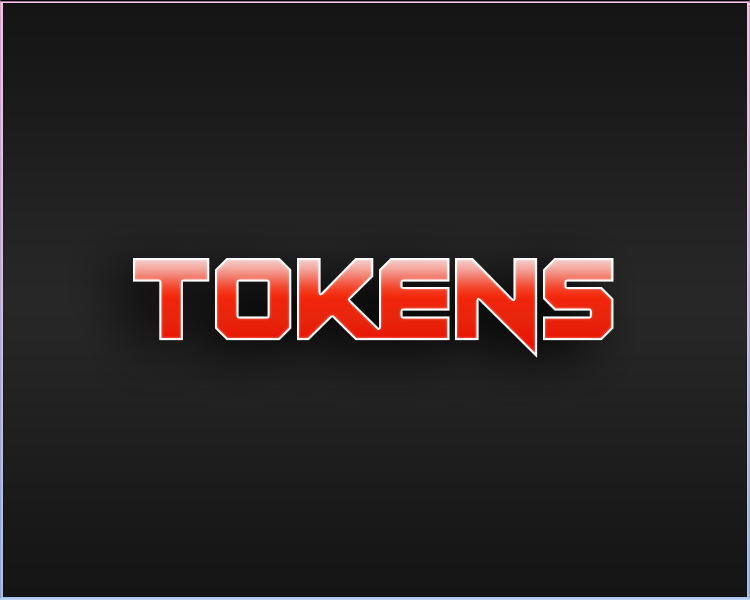
<style>
.page{position:relative;width:750px;height:600px}
.page>*{position:absolute;margin:0}
.t1{font:120px "NoFlickingThanks!"}
</style>
<div class="page">
<p class="t1" style="left:133px;top:258px;width:481px;height:100px">TOKENS</p>
</div>
